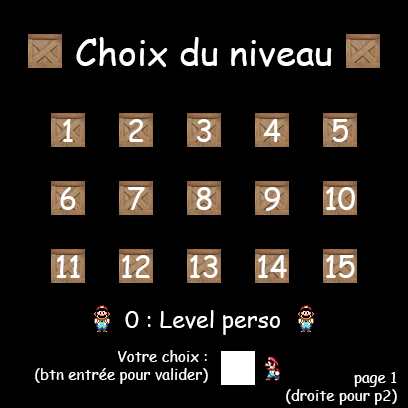
<style>
.page{position:relative;width:408px;height:408px;background:#000000}
.page>*{position:absolute;margin:0}
.t1{font:36px "ComicSansMS";color:#ffffff}
.t2{font:30px "ComicSansMS";color:#ffffff}
.t3{font:23px "ComicSansMS";color:#ffffff}
.t4{font:15px "ComicSansMS";color:#ffffff}
</style>
<div class="page">
<p class="t1" style="left:76px;top:37px;width:256px;height:30px">Choix du niveau</p>
<p class="t2" style="left:63px;top:119px;width:10px;height:23px">1</p>
<p class="t2" style="left:129px;top:119px;width:15px;height:23px">2</p>
<p class="t2" style="left:197px;top:119px;width:14px;height:23px">3</p>
<p class="t2" style="left:263px;top:119px;width:18px;height:23px">4</p>
<p class="t2" style="left:332px;top:119px;width:16px;height:23px">5</p>
<p class="t2" style="left:60px;top:187px;width:16px;height:23px">6</p>
<p class="t2" style="left:128px;top:187px;width:17px;height:23px">7</p>
<p class="t2" style="left:196px;top:187px;width:16px;height:23px">8</p>
<p class="t2" style="left:264px;top:187px;width:16px;height:24px">9</p>
<p class="t2" style="left:326px;top:187px;width:29px;height:23px">10</p>
<p class="t2" style="left:56px;top:255px;width:24px;height:23px">11</p>
<p class="t2" style="left:122px;top:255px;width:28px;height:23px">12</p>
<p class="t2" style="left:190px;top:255px;width:28px;height:23px">13</p>
<p class="t2" style="left:258px;top:255px;width:29px;height:23px">14</p>
<p class="t2" style="left:326px;top:255px;width:29px;height:23px">15</p>
<p class="t3" style="left:125px;top:310px;width:155px;height:25px">0 : Level perso</p>
<p class="t4" style="left:35px;top:350px;width:173px;height:34px;text-align:right">Votre choix :      <br>(btn entrée pour valider)</p>
<p class="t4" style="left:286px;top:372px;width:111px;height:33px;text-align:right">page 1 <br>(droite pour p2)</p>
</div>
